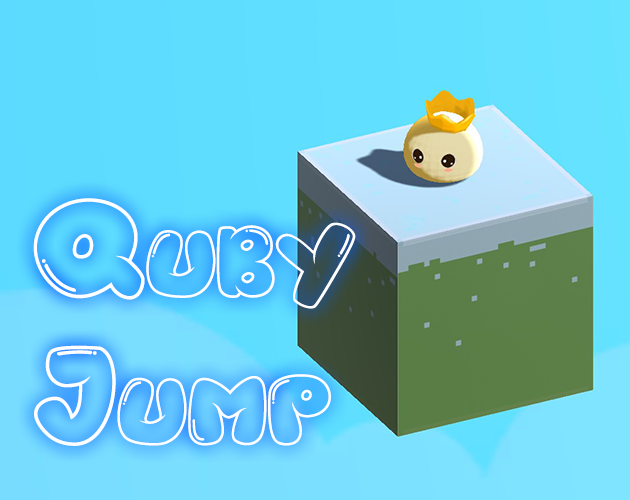
<style>
.page{position:relative;width:630px;height:500px}
.page>*{position:absolute;margin:0}
.t1{font:123px "Balonku-Regular";color:#ffffff;font-variant:small-caps}
</style>
<div class="page">
<p class="t1" style="left:33px;top:198px;width:323px;height:248px">Quby<br>Jump</p>
</div>
